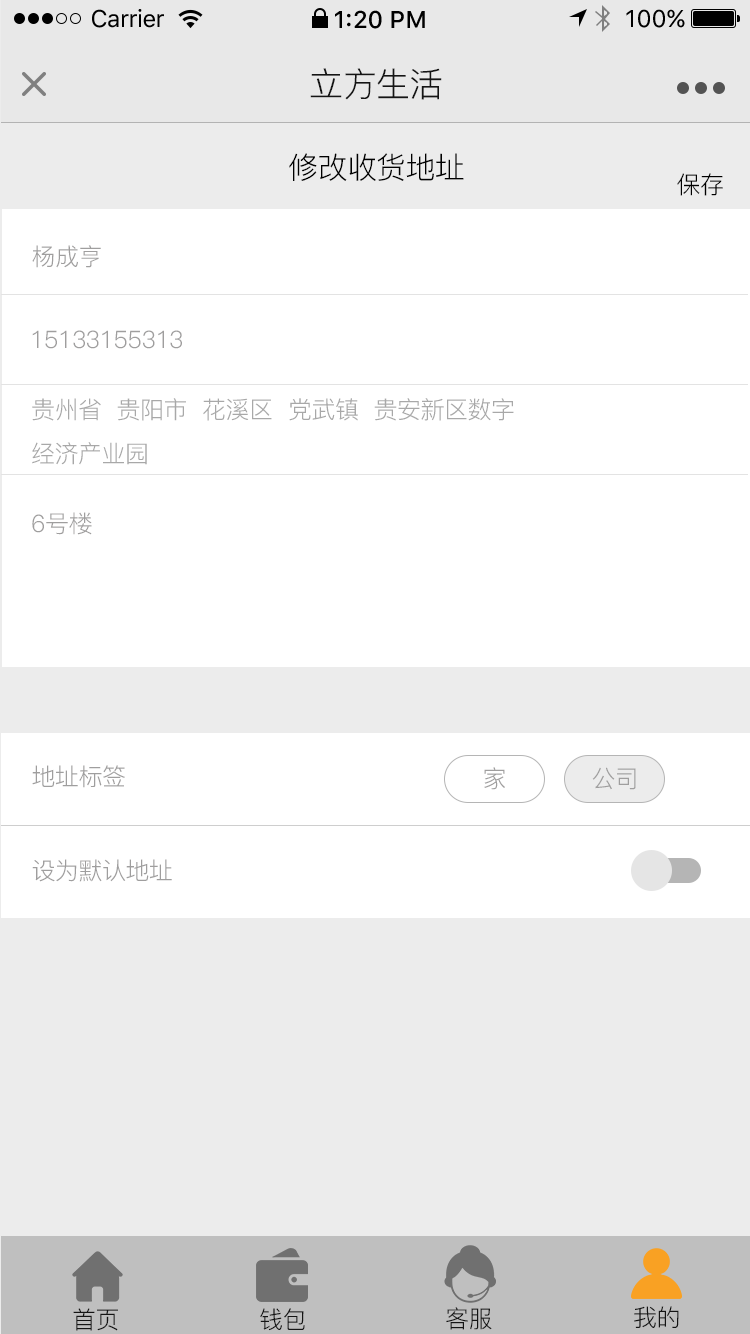
<style>
.page{position:relative;width:750px;height:1334px;background:#ffffff}
.page>*{position:absolute;margin:0}
.t1{font:24px "SFUIText-Regular";letter-spacing:-0.025em;color:#000000}
.t2{font:24px "SFUIText-Medium";color:#000000}
.t3{font:24px "SFUIText-Regular";color:#000000}
.t4{font:34px "PingFang-SC-Regular";letter-spacing:-0.02em;color:#141414}
.t5{font:30px "PingFang-SC-Regular";letter-spacing:-0.02em;color:#000000}
.t6{font:24px "PingFang-SC-Regular";letter-spacing:-0.02em;color:#000000}
.t7{font:24px "PingFang-SC-Regular";letter-spacing:-0.02em;color:#9f9e9e}
.t8{font:24px/44px "PingFang-SC-Regular";letter-spacing:-0.02em;color:#a8a8a8}
.t9{font:24px "PingFang-SC-Regular";letter-spacing:-0.02em;color:#141414}
</style>
<div class="page">
<p class="t1" style="left:92px;top:9px;width:72px;height:19px">Carrier</p>
<p class="t2" style="left:335px;top:10px;width:90px;height:19px">1:20 PM</p>
<p class="t3" style="left:626px;top:9px;width:59px;height:19px">100%</p>
<p class="t4" style="left:310px;top:68px;width:132px;height:32px">立方生活</p>
<p class="t5" style="left:289px;top:153px;width:175px;height:28px">修改收货地址</p>
<p class="t6" style="left:677px;top:173px;width:46px;height:23px">保存</p>
<p class="t7" style="left:32px;top:245px;width:69px;height:23px">杨成亨</p>
<p class="t7" style="left:32px;top:330px;width:150px;height:19px">15133155313</p>
<p class="t8" style="left:32px;top:398px;width:482px;height:67px">贵州省  贵阳市  花溪区  党武镇  贵安新区数字<br>经济产业园</p>
<p class="t7" style="left:32px;top:512px;width:60px;height:23px">6号楼</p>
<p class="t7" style="left:32px;top:765px;width:93px;height:23px">地址标签</p>
<p class="t7" style="left:484px;top:767px;width:21px;height:23px">家</p>
<p class="t7" style="left:592px;top:767px;width:44px;height:23px">公司</p>
<p class="t7" style="left:32px;top:859px;width:140px;height:23px">设为默认地址</p>
<p class="t9" style="left:73px;top:1308px;width:45px;height:23px">首页</p>
<p class="t9" style="left:260px;top:1308px;width:45px;height:23px">钱包</p>
<p class="t9" style="left:446px;top:1307px;width:46px;height:23px">客服</p>
<p class="t9" style="left:634px;top:1306px;width:45px;height:22px">我的</p>
</div>
